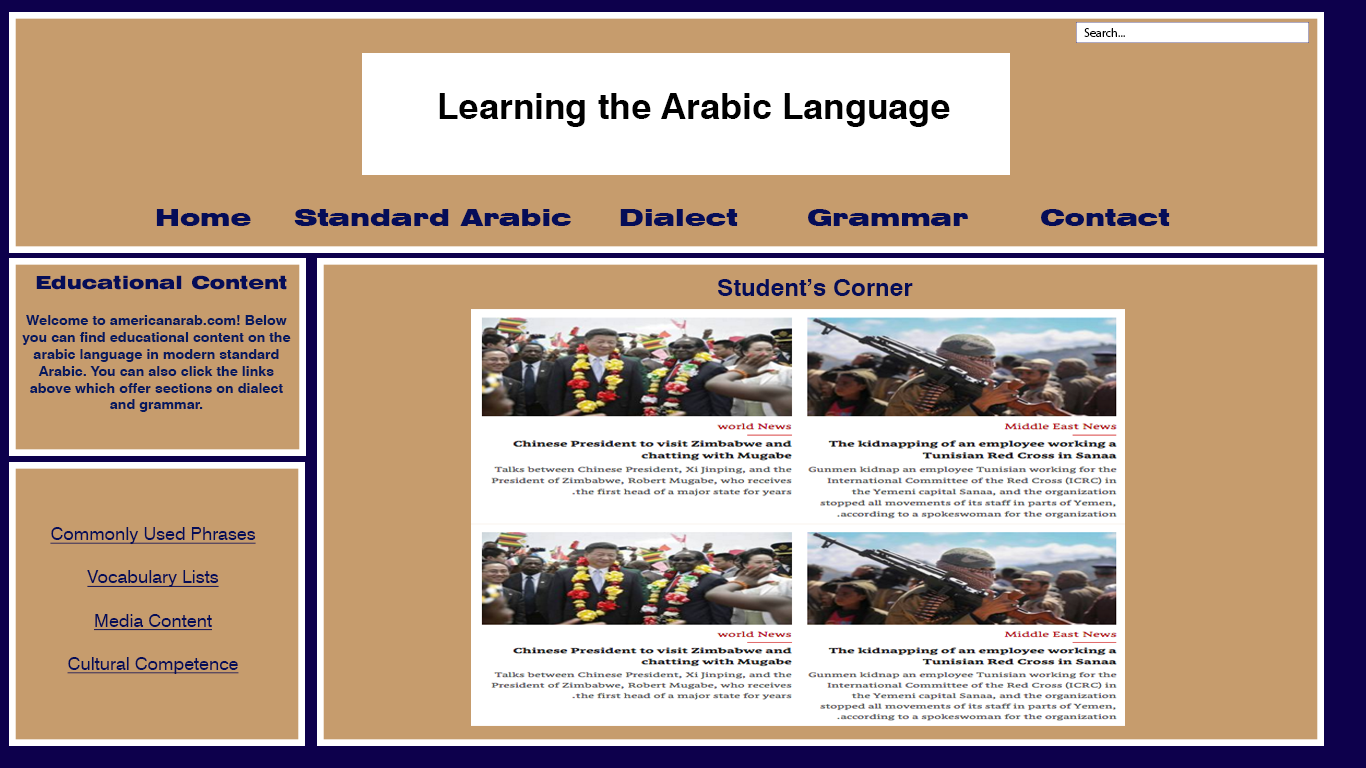
<style>
.page{position:relative;width:1366px;height:768px;background:#c69c6d}
.page>*{position:absolute;margin:0}
.t1{font:12px "MyriadPro-Regular";color:#000000}
.t2{font:36px "Swiss721BT-Bold";color:#000000}
.t3{font:24px "Swiss721BT-Bold";color:#000000}
.t4{font:24px "Swiss721BT-BlackExtended";color:#050d58}
.t5{font:18px "Swiss721BT-BlackExtended";color:#050d58}
.t6{font:24px "Swiss721BT-Bold";color:#050d58}
.t7{font:14px "Swiss721BT-Bold";color:#06195e}
.t8{font:18px "Swiss721BT-Roman";color:#050d58;text-decoration:underline}
</style>
<div class="page">
<p class="t1" style="left:1084px;top:28px;width:41px;height:9px">Search...</p>
<p class="t2" style="left:439px;top:93px;width:511px;height:34px"><span class="t3"><br></span>Learning the Arabic Language</p>
<p class="t4" style="left:156px;top:209px;width:95px;height:17px">Home</p>
<p class="t4" style="left:294px;top:209px;width:277px;height:17px">Standard Arabic</p>
<p class="t4" style="left:620px;top:209px;width:118px;height:17px">Dialect</p>
<p class="t4" style="left:808px;top:209px;width:160px;height:17px">Grammar</p>
<p class="t4" style="left:1041px;top:209px;width:129px;height:17px">Contact</p>
<p class="t5" style="left:36px;top:275px;width:251px;height:15px">Educational Content</p>
<p class="t6" style="left:718px;top:279px;width:195px;height:17px">Student’s Corner</p>
<p class="t7" style="left:22px;top:315px;width:269px;height:97px;text-align:center">Welcome to americanarab.com! Below you can find educational content on the arabic language in modern standard Arabic. You can also click the links above which offer sections on dialect and grammar.</p>
<p class="t8" style="left:50px;top:527px;width:206px;height:147px;text-align:center">Commonly Used Phrases<br><br>Vocabulary Lists<br><br>Media Content<br><br>Cultural Competence</p>
</div>
